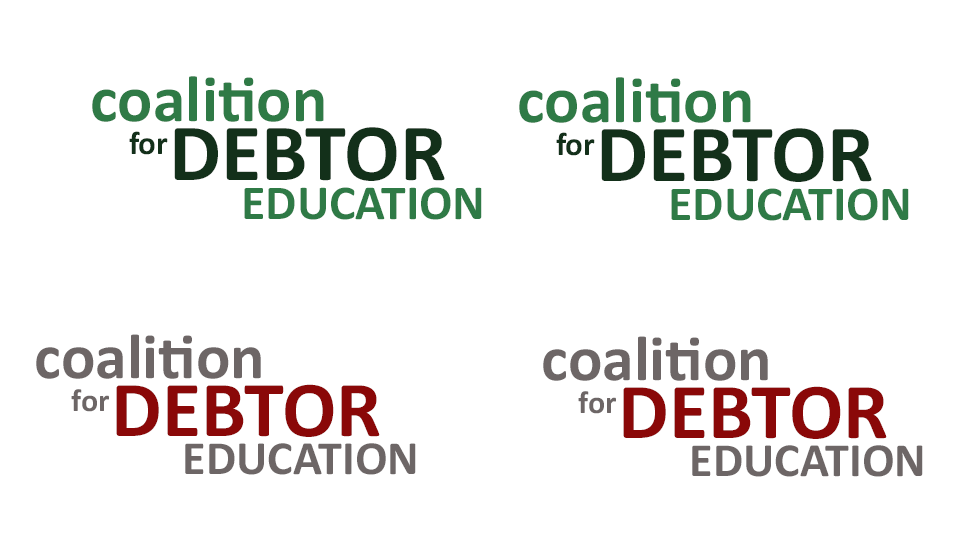
<style>
.page{position:relative;width:960px;height:560px;background:#ffffff}
.page>*{position:absolute;margin:0}
.t1{font:65.6px "Calibri-Bold";color:#2f7a46}
.t2{font:32.8px "Calibri-Bold";color:#13301a}
.t3{font:82.1px "Calibri-Bold";color:#13301a}
.t4{font:49.2px "Calibri-Bold";color:#2f7a46}
.t5{font:63.9px "Calibri-Bold";color:#6d6666}
.t6{font:31.9px "Calibri-Bold";color:#6d6666}
.t7{font:79.9px "Calibri-Bold";color:#8a0808}
.t8{font:47.9px "Calibri-Bold";color:#6d6666}
</style>
<div class="page">
<p class="t1" style="left:92px;top:76px;width:232px;height:46px">coalition</p>
<p class="t1" style="left:519px;top:77px;width:232px;height:46px">coalition</p>
<p class="t2" style="left:129px;top:131px;width:39px;height:24px">for</p>
<p class="t3" style="left:174px;top:127px;width:271px;height:54px">DEBTOR</p>
<p class="t2" style="left:556px;top:132px;width:39px;height:24px">for</p>
<p class="t3" style="left:601px;top:128px;width:271px;height:54px">DEBTOR</p>
<p class="t4" style="left:244px;top:187px;width:238px;height:33px">EDUCATION</p>
<p class="t4" style="left:671px;top:188px;width:238px;height:33px">EDUCATION</p>
<p class="t5" style="left:36px;top:334px;width:225px;height:45px">coalition</p>
<p class="t5" style="left:543px;top:336px;width:225px;height:45px">coalition</p>
<p class="t6" style="left:71px;top:389px;width:38px;height:23px">for</p>
<p class="t7" style="left:116px;top:384px;width:264px;height:53px">DEBTOR</p>
<p class="t7" style="left:623px;top:386px;width:264px;height:53px">DEBTOR</p>
<p class="t6" style="left:578px;top:391px;width:38px;height:23px">for</p>
<p class="t8" style="left:185px;top:443px;width:231px;height:32px">EDUCATION</p>
<p class="t8" style="left:692px;top:445px;width:231px;height:32px">EDUCATION</p>
</div>
